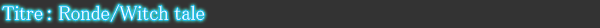
<style>
.page{position:relative;width:600px;height:28px;background:#333333}
.page>*{position:absolute;margin:0}
.t1{font:20px "MS-PMincho";color:#ffffff}
</style>
<div class="page">
<p class="t1" style="left:2px;top:4px;width:203px;height:18px">Titre : Ronde/Witch tale</p>
</div>
